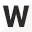
<style>
.page{position:relative;width:32px;height:32px;background:#ffffff}
.page>*{position:absolute;margin:0}
.t1{font:30px "Industry-Black";color:#2b2a28;text-transform:uppercase}
</style>
<div class="page">
<p class="t1" style="left:2px;top:5px;width:28px;height:22px">W</p>
</div>
